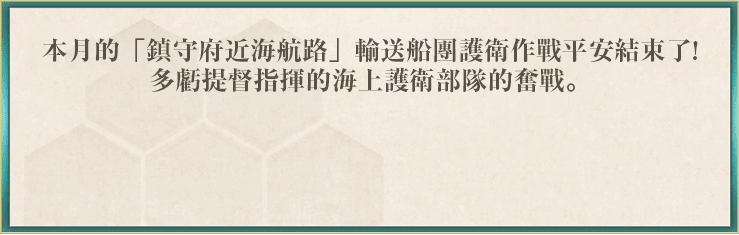
<style>
.page{position:relative;width:739px;height:235px}
.page>*{position:absolute;margin:0}
.t1{font:26px/30px "RyuminPr6N-ExBold";color:#595047}
</style>
<div class="page">
<p class="t1" style="left:42px;top:37px;width:656px;height:56px;text-align:center">本月的「鎮守府近海航路」輸送船團護衛作戰平安結束了!<br>多虧提督指揮的海上護衛部隊的奮戰。</p>
</div>
